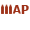
<style>
.page{position:relative;width:30px;height:30px;background:#ffffff}
.page>*{position:absolute;margin:0}
.t1{font:12px "Tahoma-Bold";color:#9e3219}
</style>
<div class="page">
<p class="t1" style="left:12px;top:5px;width:17px;height:9px">AP</p>
</div>
